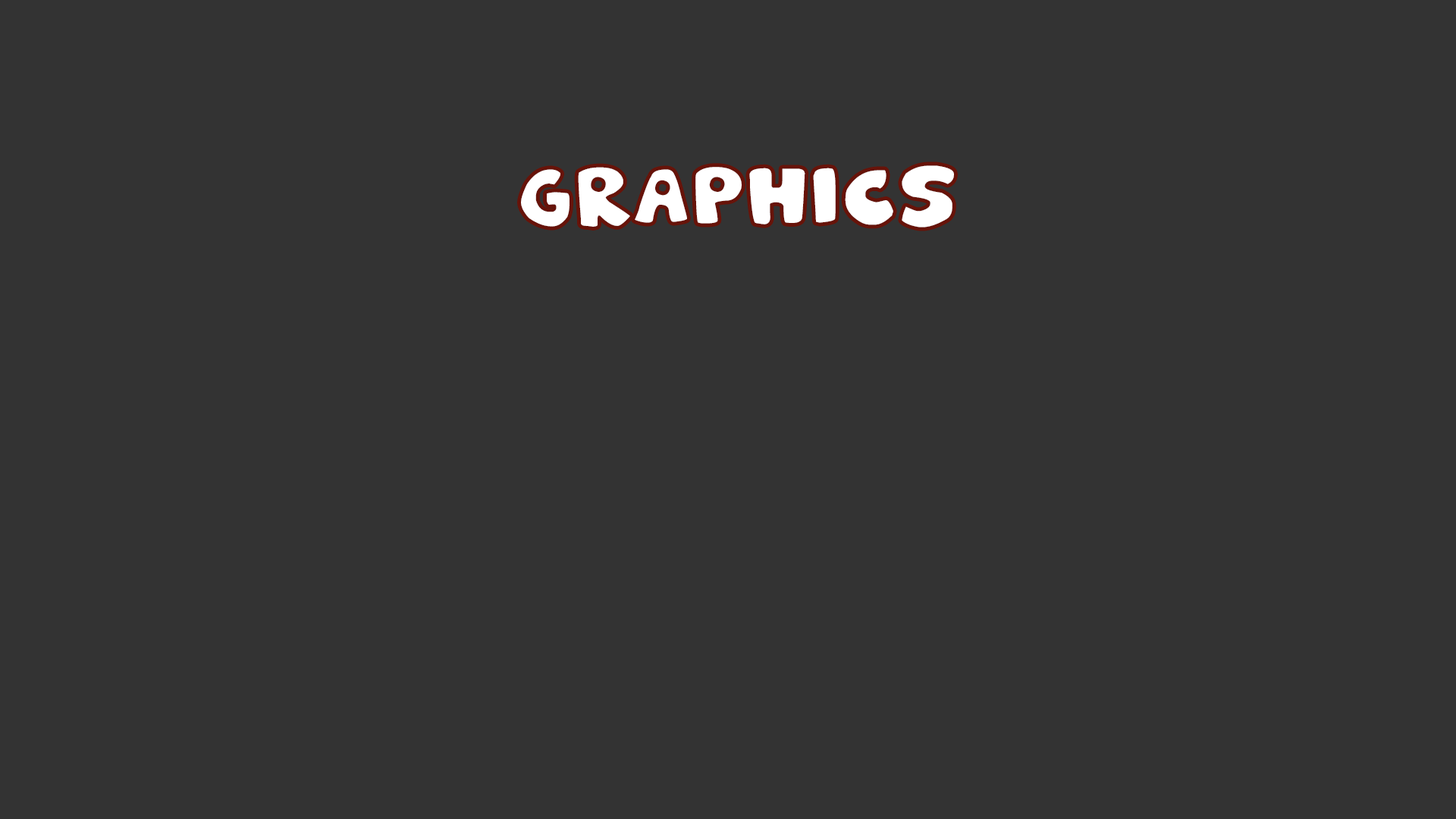
<style>
.page{position:relative;width:1456px;height:819px;background:#333333}
.page>*{position:absolute;margin:0}
.t1{font:36.4px "PatchworkStitchlingsColor";letter-spacing:-0.025em;color:#ffffff}
</style>
<div class="page">
<p class="t1" style="left:521px;top:165px;width:433px;height:62px;text-align:center">graphics</p>
</div>
